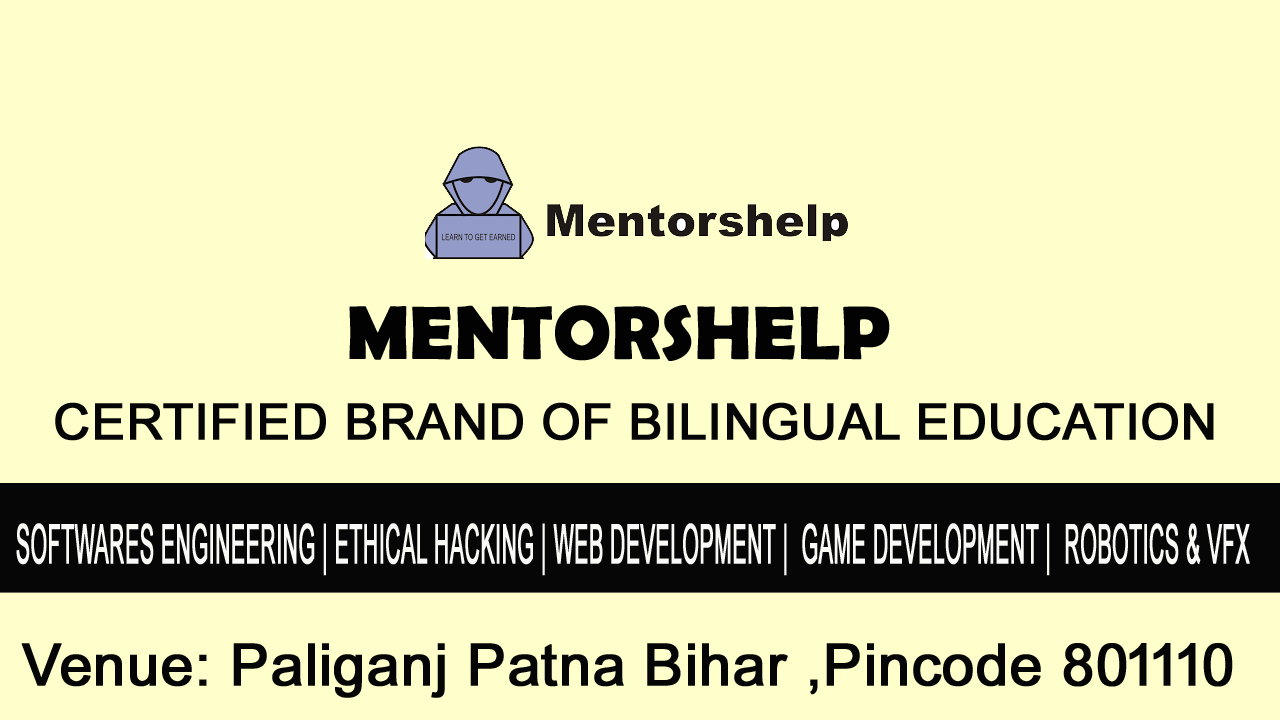
<style>
.page{position:relative;width:1280px;height:720px;background:#ffffcb}
.page>*{position:absolute;margin:0}
.t1{font:75px "BerlinSansFBDemi-Bold";color:#020202;font-weight:bold}
.t2{font:50px "ArialMT";color:#050505;font-weight:bold}
.t3{font:54.3px "ArialMT";color:#f9f9f6;font-weight:bold;scale:0.39 1}
.t4{font:58.3px "ArialMT";color:#050505;font-weight:bold}
</style>
<div class="page">
<p class="t1" style="left:349px;top:305px;width:541px;height:56px">MENTORSHELP</p>
<p class="t2" style="left:55px;top:402px;width:1159px;height:39px">CERTIFIED BRAND OF BILINGUAL EDUCATION</p>
<p class="t3" style="left:16px;top:523px;width:1234px;height:53px">SOFTWARES ENGINEERING | ETHICAL HACKING | WEB DEVELOPMENT |  GAME DEVELOPMENT |  ROBOTICS &amp; VFX</p>
<p class="t4" style="left:21px;top:643px;width:1212px;height:55px">Venue: Paliganj Patna Bihar ,Pincode 801110</p>
</div>
